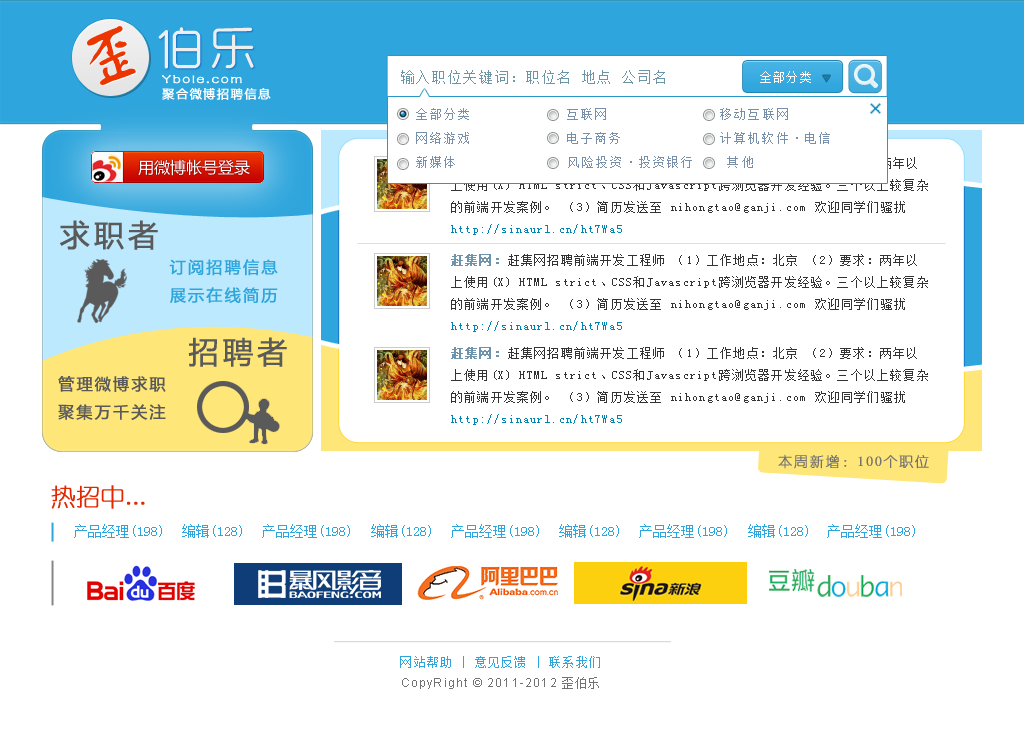
<style>
.page{position:relative;width:1024px;height:734px;background:#ffffff}
.page>*{position:absolute;margin:0}
.t1{font:72px "FZSTK--GBK1-0";letter-spacing:0.115em;color:#ec3500}
.t2{font:48px "RTWSYueRoudGoDemo-Regular";letter-spacing:0.115em;color:#eeeeee}
.t3{font:14px "FZSTK--GBK1-0";letter-spacing:0.115em;color:#ffffff;font-weight:bold}
.t4{font:14px "SimSun";letter-spacing:0.12em;color:#6d95a8}
.t5{font:12px "SimSun";letter-spacing:0.12em;color:#ffffff}
.t6{font:12px "MicrosoftYaHei";letter-spacing:0.115em;color:#ffffff;font-weight:bold}
.t7{font:12px/24px "SimSun";letter-spacing:0.175em;color:#778fa9}
.t8{font:12px/22px "SimSun";letter-spacing:0.1em;color:#333333}
.t9{font:12px/22px "SimSun";letter-spacing:0.1em;color:#6f93ab;font-weight:bold}
.t10{font:12px/22px "SimSun";letter-spacing:0.1em;color:#0084b4}
.t11{font:30px "MicrosoftYaHei";letter-spacing:0.115em;color:#5a5a5a;font-weight:bold}
.t12{font:16px/28px "MicrosoftYaHei";letter-spacing:0.115em;color:#2ea5dc;font-weight:bold}
.t13{font:16px/28px "MicrosoftYaHei";letter-spacing:0.115em;color:#5a5a5a;font-weight:bold}
.t14{font:14px "YouYuan";letter-spacing:0.1em;color:#737272;font-weight:bold}
.t15{font:24px "ç»å¸ç»åç®-regular";color:#e22700;font-weight:bold}
.t16{font:14px "SimSun";color:#2ea5dc}
.t17{font:12px "SimSun";letter-spacing:0.1em;color:#2ea5dc}
.t18{font:12px "ArialMT";letter-spacing:0.1em;color:#777777}
.t19{font:12px "SimSun";letter-spacing:0.1em;color:#5c738f}
</style>
<div class="page">
<p class="t1" style="left:87px;top:26px;width:49px;height:59px;rotate:-15deg">歪</p>
<p class="t2" style="left:158px;top:27px;width:96px;height:42px">伯乐</p>
<p class="t3" style="left:162px;top:75px;width:80px;height:9px">Ybole.com</p>
<p class="t4" style="left:401px;top:70px;width:264px;height:14px">输入职位关键词：职位名 地点 公司名</p>
<p class="t5" style="left:760px;top:71px;width:51px;height:12px">全部分类</p>
<p class="t6" style="left:162px;top:88px;width:109px;height:12px">聚合微博招聘信息</p>
<p class="t7" style="left:416px;top:108px;width:414px;height:60px">全部分类           互联网         移动互联网     <br>网络游戏           电子商务            计算机软件·电信    <br>新媒体    风险投资·投资银行    其他</p>
<p class="t8" style="left:451px;top:157px;width:477px;height:78px"><span class="t9">赶集网：</span>赶集网招聘前端开发工程师 （1）工作地点：北京 （2）要求：两年以上使用(X) HTML strict、CSS和Javascript跨浏览器开发经验。三个以上较复杂的前端开发案例。 （3）简历发送至 nihongtao@ganji.com 欢迎同学们骚扰 <span class="t10">http://sinaurl.cn/ht7Wa5</span></p>
<p class="t11" style="left:60px;top:220px;width:98px;height:30px">求职者</p>
<p class="t8" style="left:451px;top:254px;width:477px;height:78px"><span class="t9">赶集网：</span>赶集网招聘前端开发工程师 （1）工作地点：北京 （2）要求：两年以上使用(X) HTML strict、CSS和Javascript跨浏览器开发经验。三个以上较复杂的前端开发案例。 （3）简历发送至 nihongtao@ganji.com 欢迎同学们骚扰 <span class="t10">http://sinaurl.cn/ht7Wa5</span></p>
<p class="t12" style="left:169px;top:259px;width:109px;height:44px">订阅招聘信息<br>展示在线简历</p>
<p class="t11" style="left:188px;top:337px;width:99px;height:30px">招聘者</p>
<p class="t8" style="left:451px;top:347px;width:477px;height:78px"><span class="t9">赶集网：</span>赶集网招聘前端开发工程师 （1）工作地点：北京 （2）要求：两年以上使用(X) HTML strict、CSS和Javascript跨浏览器开发经验。三个以上较复杂的前端开发案例。 （3）简历发送至 nihongtao@ganji.com 欢迎同学们骚扰 <span class="t10">http://sinaurl.cn/ht7Wa5</span></p>
<p class="t13" style="left:58px;top:376px;width:108px;height:44px">管理微博求职<br>聚集万千关注</p>
<p class="t14" style="left:778px;top:454px;width:151px;height:15px">本周新增：100个职位</p>
<p class="t15" style="left:51px;top:485px;width:94px;height:24px">热招中...</p>
<p class="t16" style="left:74px;top:524px;width:88px;height:14px">产品经理(198)</p>
<p class="t16" style="left:182px;top:524px;width:60px;height:14px">编辑(128)</p>
<p class="t16" style="left:262px;top:524px;width:88px;height:14px">产品经理(198)</p>
<p class="t16" style="left:371px;top:524px;width:60px;height:14px">编辑(128)</p>
<p class="t16" style="left:451px;top:524px;width:88px;height:14px">产品经理(198)</p>
<p class="t16" style="left:559px;top:524px;width:60px;height:14px">编辑(128)</p>
<p class="t16" style="left:639px;top:524px;width:88px;height:14px">产品经理(198)</p>
<p class="t16" style="left:748px;top:524px;width:60px;height:14px">编辑(128)</p>
<p class="t16" style="left:827px;top:524px;width:88px;height:14px">产品经理(198)</p>
<p class="t17" style="left:400px;top:656px;width:200px;height:12px">网站帮助 | 意见反馈 | 联系我们</p>
<p class="t18" style="left:402px;top:677px;width:197px;height:12px">CopyRight © 2011-2012 <span class="t19">歪伯乐</span></p>
</div>
